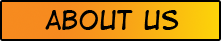
<style>
.page{position:relative;width:221px;height:41px}
.page>*{position:absolute;margin:0}
.t1{font:25px "DigitalStrip";color:#000000}
</style>
<div class="page">
<p class="t1" style="left:45px;top:10px;width:134px;height:20px">about us</p>
</div>
